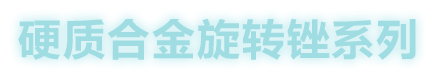
<style>
.page{position:relative;width:441px;height:81px;background:#ffffff}
.page>*{position:absolute;margin:0}
.t1{font:44.8px "FZLTCHJW--GB1-0";color:#a0dde3;text-transform:uppercase}
</style>
<div class="page">
<p class="t1" style="left:18px;top:18px;width:398px;height:42px">硬质合金旋转锉系列</p>
</div>
